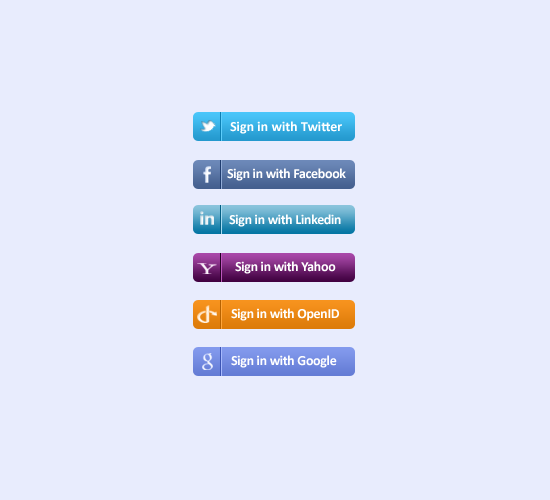
<style>
.page{position:relative;width:550px;height:500px;background:#e8ecfd}
.page>*{position:absolute;margin:0}
.t1{font:14px "Calibri-Bold";color:#ffffff}
.t2{font:14px "Calibri-Bold";letter-spacing:-0.025em;color:#ffffff}
</style>
<div class="page">
<p class="t1" style="left:230px;top:121px;width:112px;height:13px">Sign in with Twitter</p>
<p class="t2" style="left:227px;top:168px;width:119px;height:13px">Sign in with Facebook</p>
<p class="t2" style="left:229px;top:214px;width:112px;height:13px">Sign in with Linkedin</p>
<p class="t2" style="left:235px;top:261px;width:101px;height:13px">Sign in with Yahoo</p>
<p class="t2" style="left:231px;top:308px;width:108px;height:13px">Sign in with OpenID</p>
<p class="t2" style="left:231px;top:355px;width:106px;height:13px">Sign in with Google</p>
</div>
